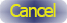
<style>
.page{position:relative;width:67px;height:23px}
.page>*{position:absolute;margin:0}
.t1{font:17.8px "Tahoma";letter-spacing:-0.05em;color:#e8e613}
</style>
<div class="page">
<p class="t1" style="left:10px;top:3px;width:46px;height:14px">Cancel</p>
</div>
